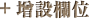
<style>
.page{position:relative;width:108px;height:19px;background:#ffffff}
.page>*{position:absolute;margin:0}
.t1{font:18px "RyuminPr6N-ExBold";font-weight:bold}
</style>
<div class="page">
<p class="t1" style="left:16px;top:0px;width:73px;height:19px">增設欄位</p>
</div>
